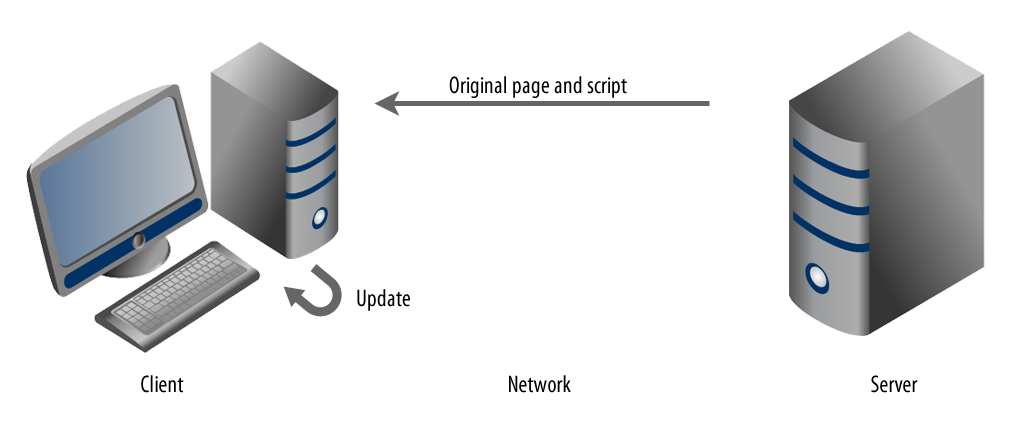
<style>
.page{position:relative;width:1030px;height:434px;background:#ffffff}
.page>*{position:absolute;margin:0}
.t1{font:24px "MyriadPro-Cond";color:#000000}
</style>
<div class="page">
<p class="t1" style="left:449px;top:76px;width:178px;height:22px">Original page and script</p>
<p class="t1" style="left:357px;top:289px;width:53px;height:22px">Update</p>
<p class="t1" style="left:141px;top:375px;width:43px;height:18px">Client</p>
<p class="t1" style="left:509px;top:375px;width:62px;height:18px">Network</p>
<p class="t1" style="left:871px;top:375px;width:47px;height:18px">Server</p>
</div>
